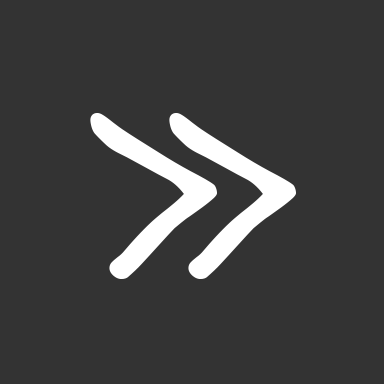
<style>
.page{position:relative;width:384px;height:384px;background:#333333}
.page>*{position:absolute;margin:0}
.t1{font:289px "SegoeScript";letter-spacing:-0.3em;color:#ffffff}
</style>
<div class="page">
<p class="t1" style="left:90px;top:113px;width:206px;height:166px">&gt;&gt;</p>
</div>
